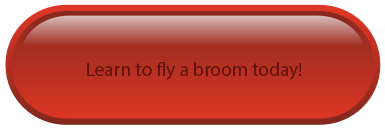
<style>
.page{position:relative;width:385px;height:130px}
.page>*{position:absolute;margin:0}
.t1{font:19.4px "MyriadPro-Regular";color:#60120d}
</style>
<div class="page">
<p class="t1" style="left:87px;top:62px;width:215px;height:18px">Learn to fly a broom today!</p>
</div>
